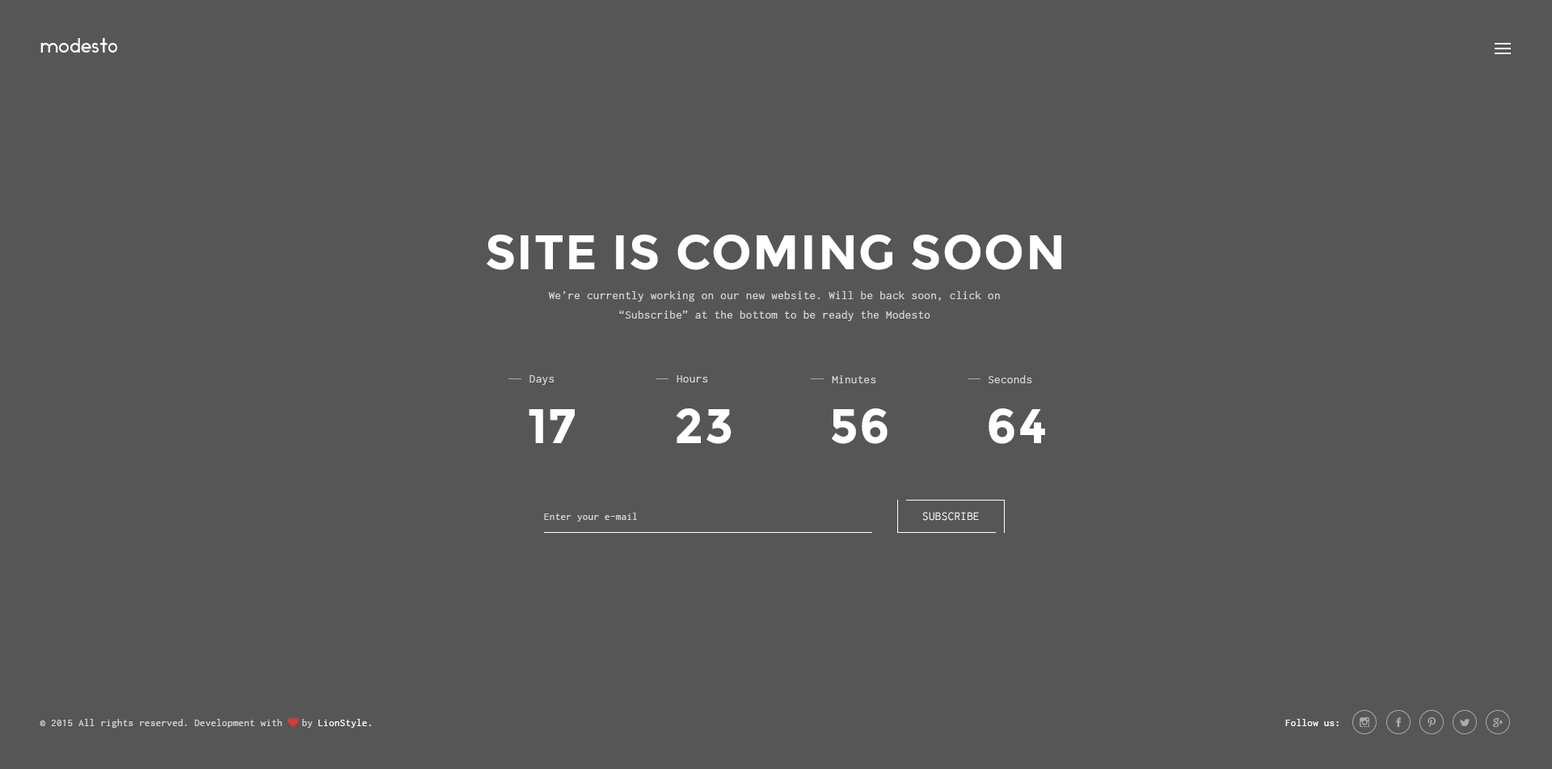
<style>
.page{position:relative;width:1552px;height:769px;background:#565656}
.page>*{position:absolute;margin:0}
.t1{font:19.4px "Ikaros";letter-spacing:0.025em;color:#ffffff}
.t2{font:48.5px "Montserrat-Bold";letter-spacing:0.025em;color:#ffffff;text-transform:uppercase}
.t3{font:12.1px/19.4px "Inconsolata";letter-spacing:0.025em;color:#d6d6d6}
.t4{font:12.1px "Inconsolata";letter-spacing:0.025em;color:#d6d6d6}
.t5{font:48.5px "Montserrat-Bold";letter-spacing:0.025em;color:#ffffff}
.t6{font:10.5px "Inconsolata";letter-spacing:0.025em;color:#d6d6d6}
.t7{font:12.1px "Inconsolata";letter-spacing:0.025em;color:#fefefe;text-transform:uppercase}
.t8{font:10.5px "FontAwesome";letter-spacing:0.025em;color:#d6d6d6}
.t9{font:10.5px "Inconsolata";letter-spacing:0.025em;color:#ffffff}
</style>
<div class="page">
<p class="t1" style="left:40px;top:38px;width:77px;height:15px">modesto</p>
<p class="t2" style="left:486px;top:234px;width:575px;height:36px">site is coming soon</p>
<p class="t3" style="left:548px;top:291px;width:452px;height:30px;text-align:center">We’re currently working on our new website. Will be back soon, click on “Subscribe” at the bottom to be ready the Modesto</p>
<p class="t4" style="left:529px;top:375px;width:25px;height:10px">Days</p>
<p class="t4" style="left:676px;top:375px;width:32px;height:7px">Hours</p>
<p class="t4" style="left:832px;top:375px;width:44px;height:8px">Minutes</p>
<p class="t4" style="left:988px;top:375px;width:44px;height:8px">Seconds</p>
<p class="t5" style="left:529px;top:409px;width:46px;height:34px">17</p>
<p class="t5" style="left:676px;top:408px;width:55px;height:36px">23</p>
<p class="t5" style="left:832px;top:408px;width:55px;height:36px">56</p>
<p class="t5" style="left:988px;top:408px;width:57px;height:36px">64</p>
<p class="t6" style="left:544px;top:512px;width:93px;height:9px">Enter your e-mail</p>
<p class="t7" style="left:922px;top:512px;width:57px;height:8px">SUBSCRIBE</p>
<p class="t6" style="left:40px;top:717px;width:273px;height:10px">© 2015 All rights reserved. Development with <span class="t8">♥ </span>by</p>
<p class="t9" style="left:318px;top:718px;width:53px;height:9px">LionStyle.</p>
<p class="t9" style="left:1285px;top:718px;width:53px;height:8px">Follow us:</p>
</div>
